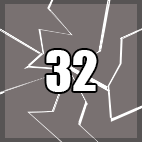
<style>
.page{position:relative;width:142px;height:142px;background:#797171}
.page>*{position:absolute;margin:0}
.t1{font:51px "Impact";color:#ffffff}
</style>
<div class="page">
<p class="t1" style="left:46px;top:50px;width:51px;height:42px">32</p>
</div>
